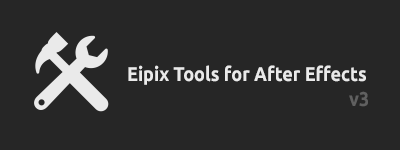
<style>
.page{position:relative;width:400px;height:150px;background:#262626}
.page>*{position:absolute;margin:0}
.t1{font:20px "Ubuntu-Bold";color:#eaeaea;scale:0.9 1}
.t2{font:20px "Ubuntu-Bold";color:#606060;scale:0.9 1}
</style>
<div class="page">
<p class="t1" style="left:128px;top:65px;width:238px;height:20px">Eipix Tools for After Effects</p>
<p class="t2" style="left:349px;top:91px;width:19px;height:16px">v3</p>
</div>
